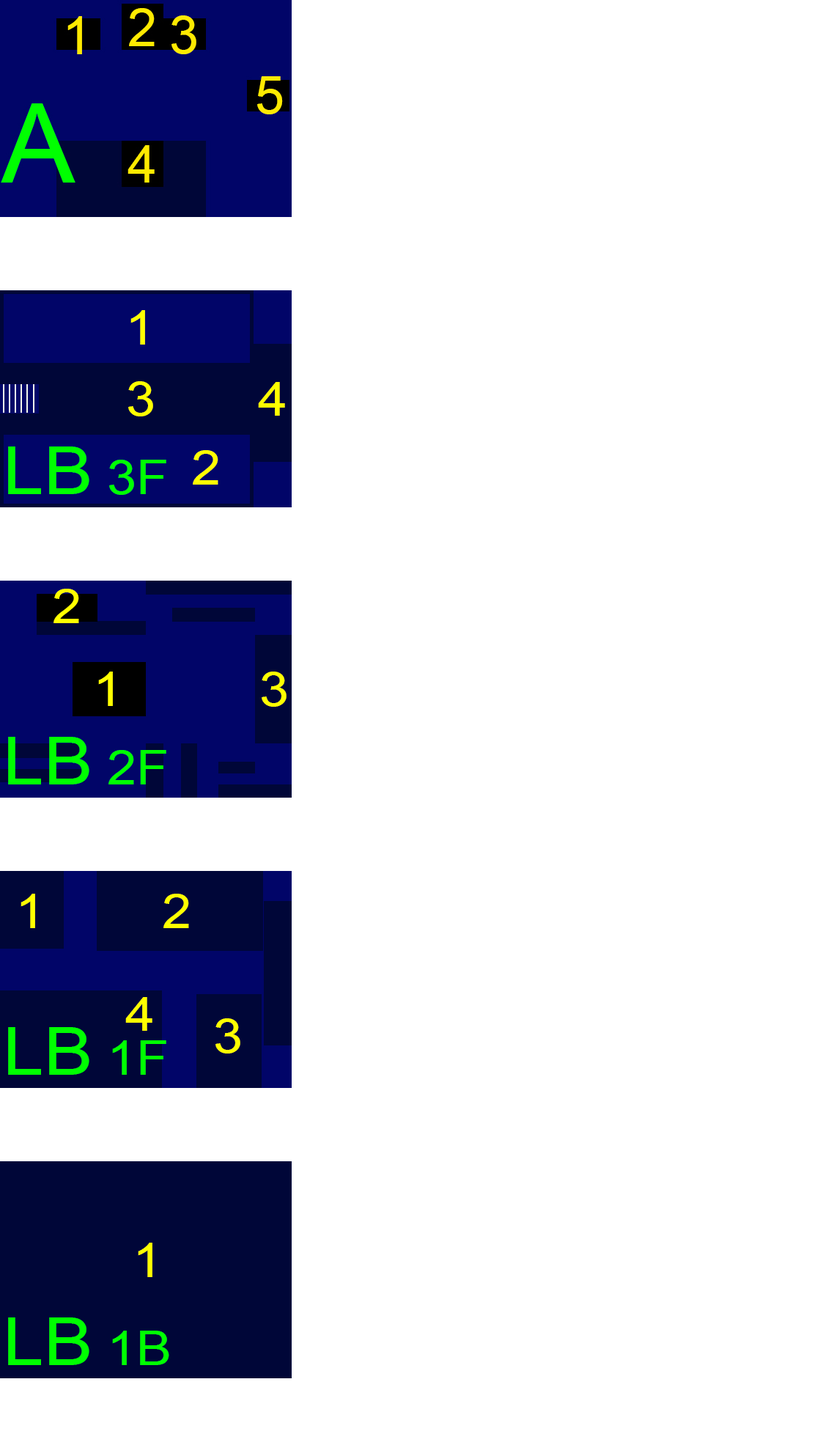
<style>
.page{position:relative;width:831px;height:1434px;background:#ffffff}
.page>*{position:absolute;margin:0}
.t1{font:47.5px "ArialMT";color:#ffff00;scale:1.11 1}
.t2{font:66px "ArialMT";color:#00ff00;scale:1.11 1}
.t3{font:47.5px "ArialMT";color:#00ff00;scale:1.11 1}
</style>
<div class="page">
<p class="t1" style="left:131px;top:310px;width:14px;height:35px">1</p>
<p class="t1" style="left:128px;top:381px;width:25px;height:35px">3</p>
<p class="t1" style="left:258px;top:382px;width:27px;height:34px">4</p>
<p class="t2" style="left:8px;top:447px;width:158px;height:48px">LB<span class="t3"> 3F</span></p>
<p class="t1" style="left:193px;top:450px;width:25px;height:35px">2</p>
<p class="t1" style="left:54px;top:589px;width:25px;height:34px">2</p>
<p class="t1" style="left:98px;top:672px;width:15px;height:34px">1</p>
<p class="t1" style="left:262px;top:672px;width:25px;height:35px">3</p>
<p class="t2" style="left:8px;top:737px;width:158px;height:48px">LB<span class="t3"> 2F</span></p>
<p class="t1" style="left:21px;top:894px;width:14px;height:34px">1</p>
<p class="t1" style="left:164px;top:894px;width:25px;height:34px">2</p>
<p class="t1" style="left:125px;top:997px;width:28px;height:34px">4</p>
<p class="t1" style="left:216px;top:1018px;width:24px;height:36px">3</p>
<p class="t2" style="left:8px;top:1027px;width:158px;height:48px">LB<span class="t3"> 1F</span></p>
<p class="t1" style="left:138px;top:1243px;width:15px;height:34px">1</p>
<p class="t2" style="left:8px;top:1318px;width:161px;height:47px">LB<span class="t3"> 1B</span></p>
</div>
